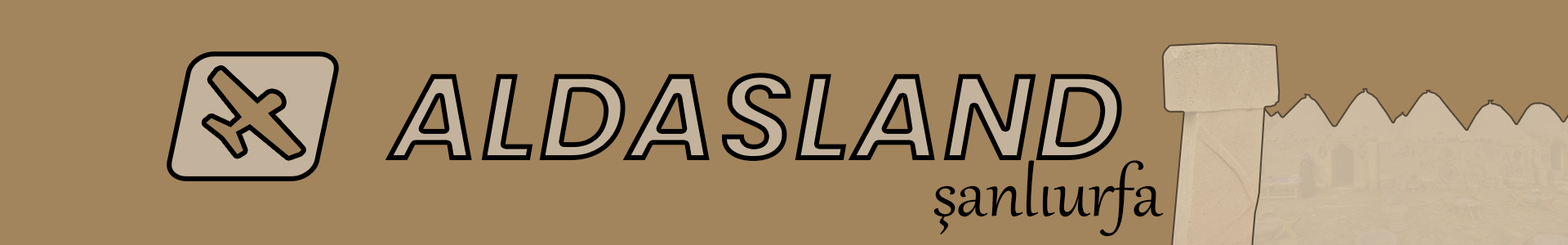
<style>
.page{position:relative;width:1568px;height:245px;background:#a2855d}
.page>*{position:absolute;margin:0}
.t1{font:122.5px "Poppins-BoldItalic"}
.t2{font:83.3px "Gabriola";color:#000000}
</style>
<div class="page">
<p class="t1" style="left:385px;top:73px;width:737px;height:89px">ALDASLAND</p>
<p class="t2" style="left:933px;top:160px;width:231px;height:77px">şanlıurfa</p>
</div>
